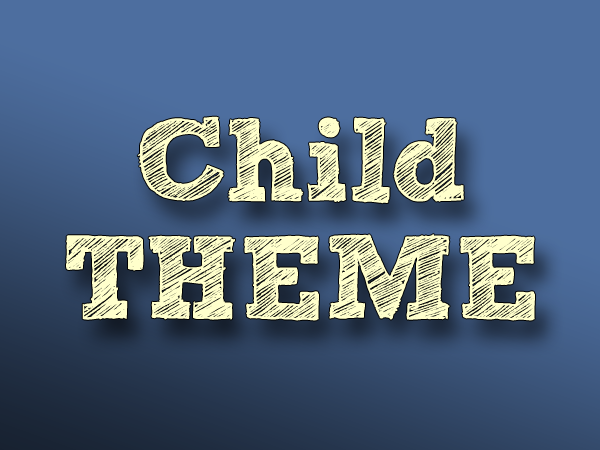
<style>
.page{position:relative;width:600px;height:450px;background:#4d6e9f}
.page>*{position:absolute;margin:0}
.t1{font:118px/118px "freeversionSketchBlock-Bold";color:#ffffcc}
</style>
<div class="page">
<p class="t1" style="left:66px;top:116px;width:469px;height:205px;text-align:center">Child<br>THEME</p>
</div>
